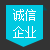
<style>
.page{position:relative;width:50px;height:50px;background:#00c9e1}
.page>*{position:absolute;margin:0}
.t1{font:12px/17px "SimSun";color:#ffffff}
</style>
<div class="page">
<p class="t1" style="left:13px;top:9px;width:23px;height:29px">诚信<br>企业</p>
</div>
